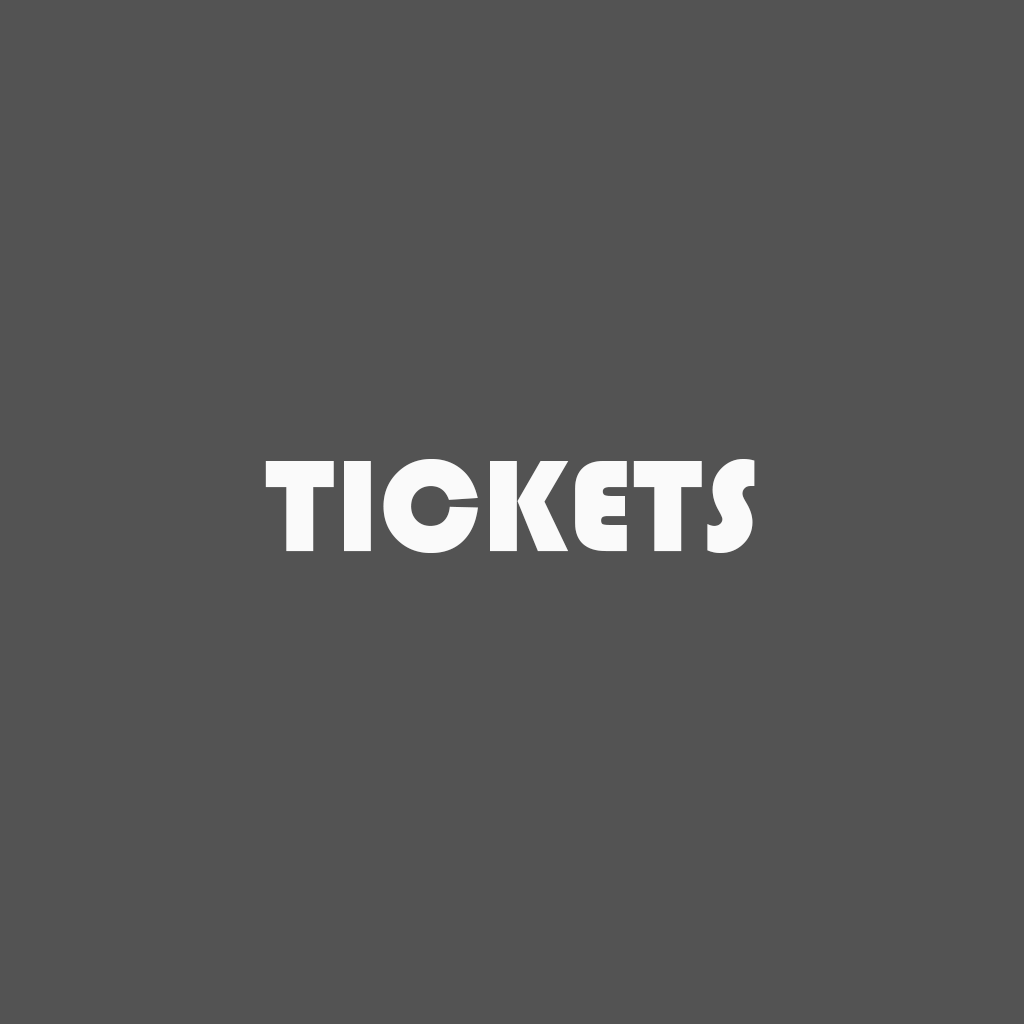
<style>
.page{position:relative;width:1024px;height:1024px;background:#535353}
.page>*{position:absolute;margin:0}
.t1{font:135px "Bauhaus93";color:#fafafa}
</style>
<div class="page">
<p class="t1" style="left:265px;top:459px;width:490px;height:94px">TICKETS</p>
</div>
